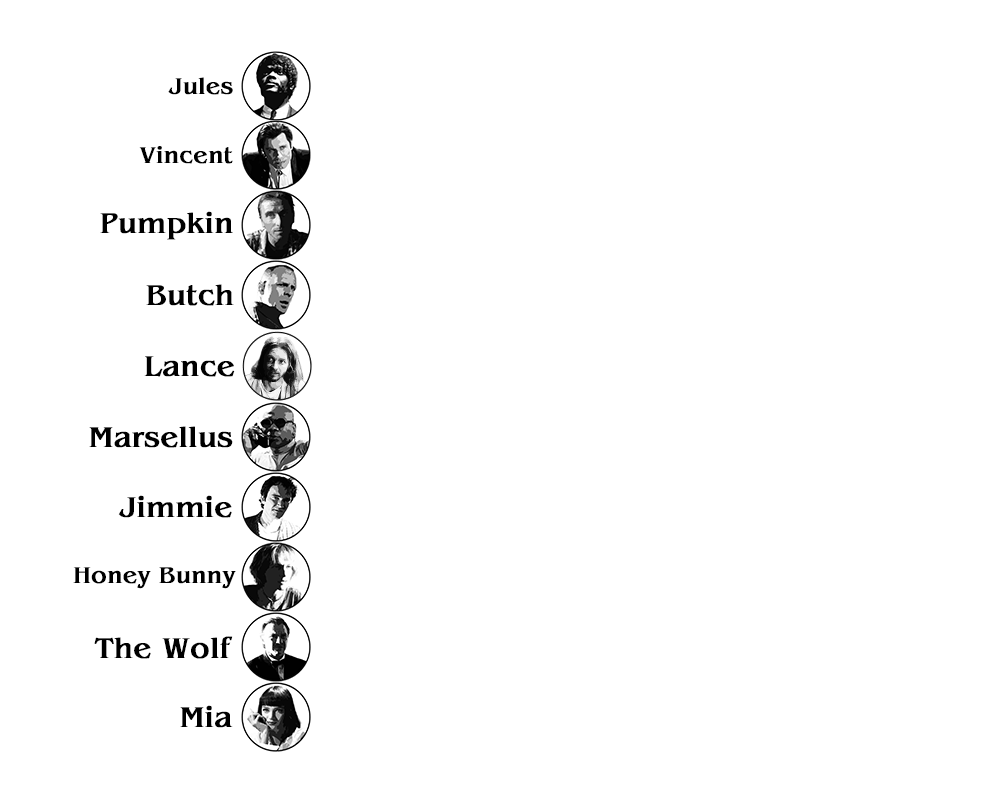
<style>
.page{position:relative;width:1000px;height:800px;background:#ffffff}
.page>*{position:absolute;margin:0}
.t1{font:24px "Benguiat-Bold";color:#000000}
.t2{font:30px "Benguiat-Bold";color:#000000}
</style>
<div class="page">
<p class="t1" style="left:168px;top:77px;width:65px;height:18px">Jules</p>
<p class="t1" style="left:139px;top:146px;width:94px;height:18px">Vincent</p>
<p class="t2" style="left:100px;top:211px;width:133px;height:29px">Pumpkin</p>
<p class="t2" style="left:146px;top:284px;width:88px;height:22px">Butch</p>
<p class="t2" style="left:144px;top:356px;width:91px;height:21px">Lance</p>
<p class="t2" style="left:89px;top:426px;width:144px;height:22px">Marsellus</p>
<p class="t2" style="left:118px;top:495px;width:114px;height:23px">Jimmie</p>
<p class="t1" style="left:73px;top:567px;width:163px;height:22px">Honey Bunny</p>
<p class="t2" style="left:94px;top:636px;width:139px;height:23px">The Wolf</p>
<p class="t2" style="left:180px;top:705px;width:53px;height:23px">Mia</p>
</div>
